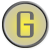
<style>
.page{position:relative;width:50px;height:50px;background:#ffffff}
.page>*{position:absolute;margin:0}
.t1{font:30px "TVpl";letter-spacing:0.05em;color:#6a6a6a}
</style>
<div class="page">
<p class="t1" style="left:16px;top:11px;width:18px;height:27px">G</p>
</div>
